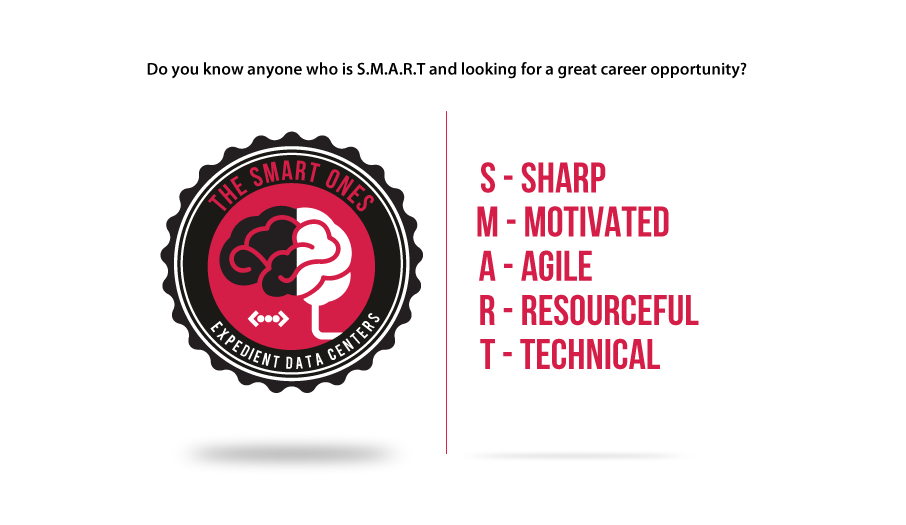
<style>
.page{position:relative;width:906px;height:525px;background:#ffffff}
.page>*{position:absolute;margin:0}
.t1{font:17.1px "MyriadPro-Semibold";color:#000000}
.t2{font:42.7px "BebasNeue";color:#d51e47}
</style>
<div class="page">
<p class="t1" style="left:147px;top:62px;width:600px;height:17px">Do you know anyone who is S.M.A.R.T and looking for a great career opportunity?</p>
<p class="t2" style="left:481px;top:162px;width:125px;height:31px">S - Sharp</p>
<p class="t2" style="left:477px;top:206px;width:192px;height:31px">M - Motivated</p>
<p class="t2" style="left:479px;top:250px;width:113px;height:31px">A - Agile</p>
<p class="t2" style="left:480px;top:294px;width:219px;height:32px">R - Resourceful</p>
<p class="t2" style="left:480px;top:338px;width:180px;height:32px">T - Technical</p>
</div>
